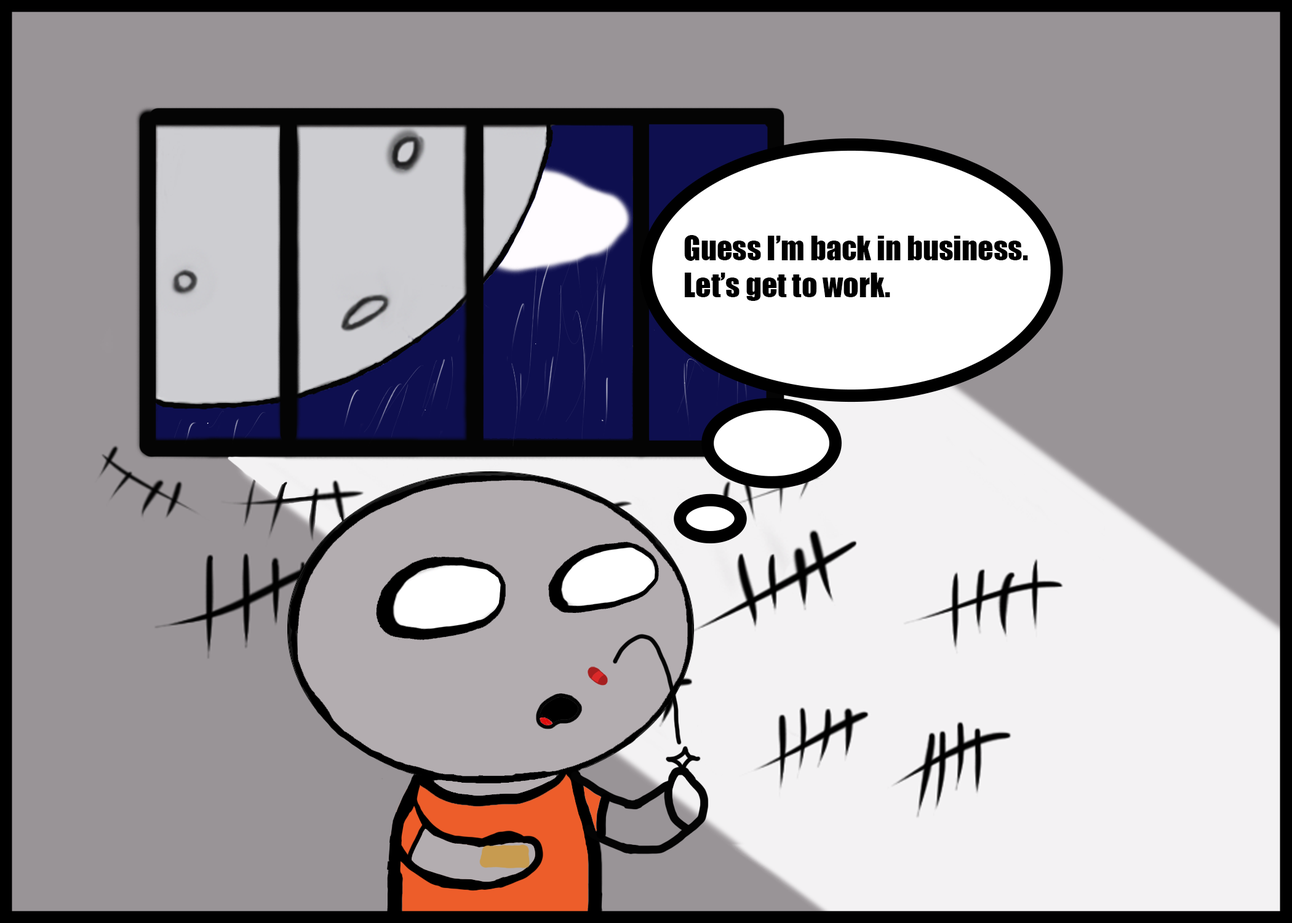
<style>
.page{position:relative;width:1292px;height:923px;background:#999497}
.page>*{position:absolute;margin:0}
.t1{font:30.8px "Impact";color:#000000}
</style>
<div class="page">
<p class="t1" style="left:684px;top:235px;width:344px;height:66px">Guess I’m back in business.<br>Let’s get to work.</p>
</div>
